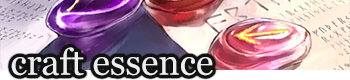
<style>
.page{position:relative;width:350px;height:80px}
.page>*{position:absolute;margin:0}
.t1{font:36px "Georgia";color:#eeeeee}
</style>
<div class="page">
<p class="t1" style="left:11px;top:47px;width:202px;height:29px">craft essence</p>
</div>
